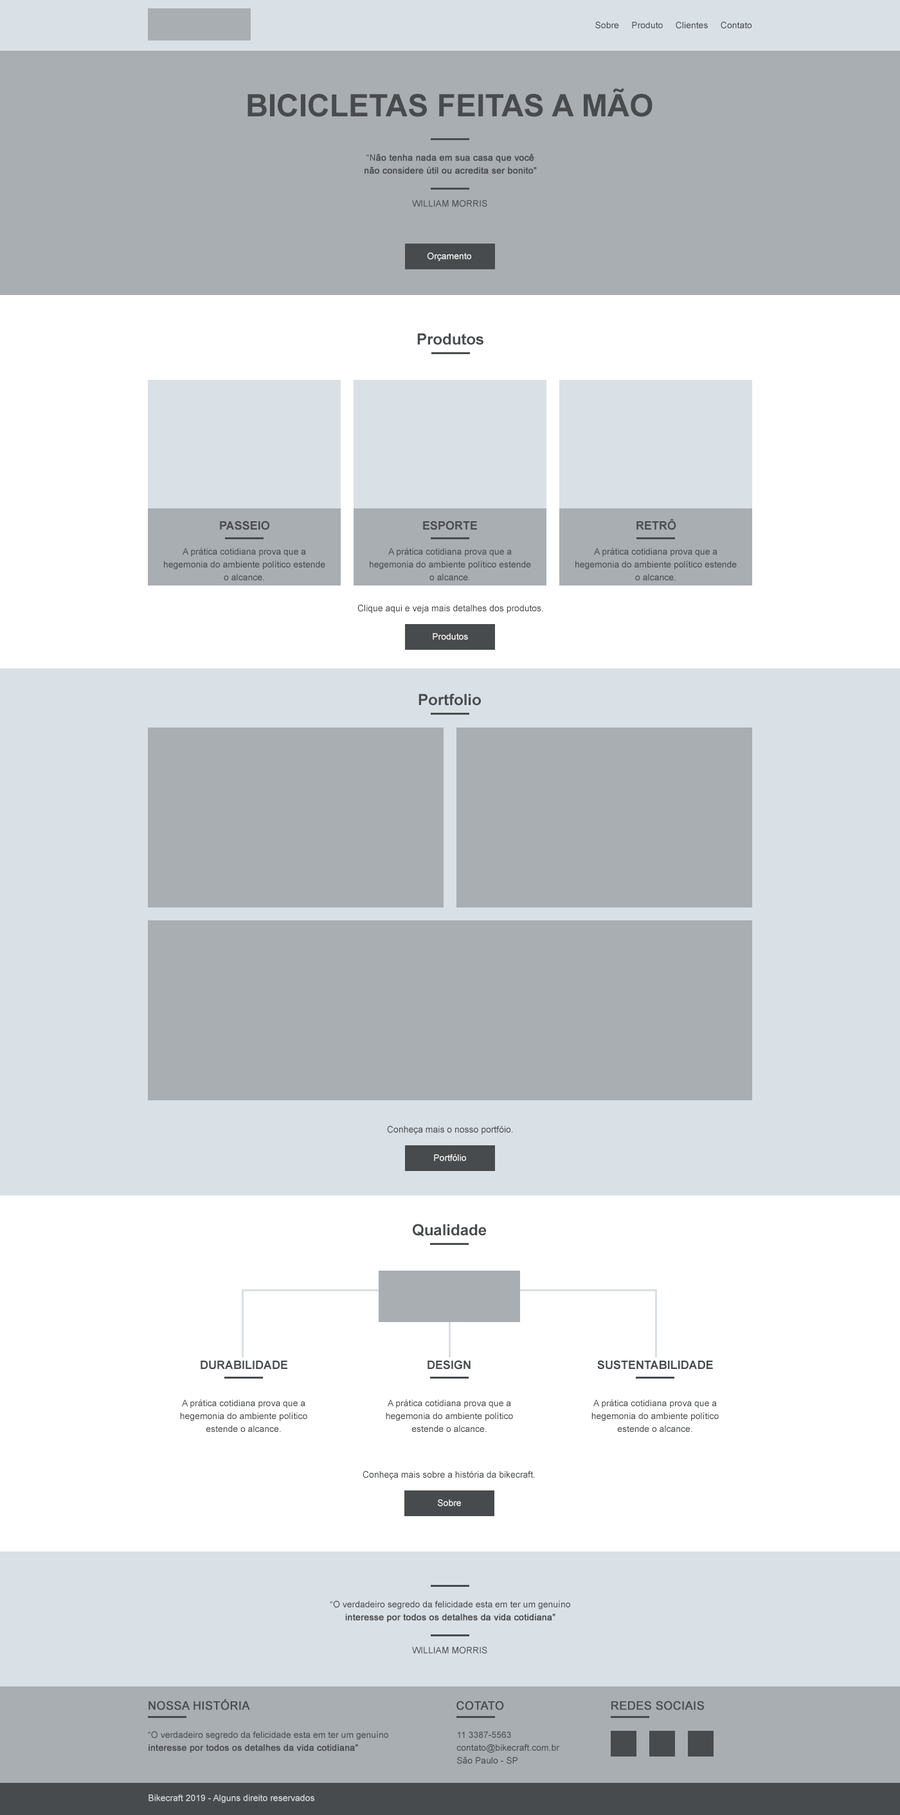
<style>
.page{position:relative;width:900px;height:1815px;background:#ffffff}
.page>*{position:absolute;margin:0}
.t1{font:9px "ArialMT";color:#484b4d}
.t2{font:30.9px "Arial-BoldMT";color:#484b4d;text-transform:uppercase}
.t3{font:9px/12.9px "ArialMT";color:#484b4d;font-weight:bold}
.t4{font:9px/12.9px "ArialMT";color:#484b4d;text-transform:uppercase}
.t5{font:9px "ArialMT";color:#484b4d;text-transform:uppercase}
.t6{font:9px "ArialMT";color:#ffffff}
.t7{font:15.4px "Arial-BoldMT";color:#484b4d}
.t8{font:11.6px "Arial-BoldMT";color:#484b4d;text-transform:uppercase}
.t9{font:9px/12.9px "ArialMT";color:#484b4d}
.t10{font:9.2px "ArialMT";color:#484b4d}
.t11{font:11.6px "ArialMT";color:#484b4d;text-transform:uppercase;font-weight:bold}
.t12{font:9px "ArialMT";color:#d9e0e6}
</style>
<div class="page">
<p class="t1" style="left:595px;top:21px;width:157px;height:8px">Sobre     Produto     Clientes     Contato</p>
<p class="t2" style="left:247px;top:88px;width:405px;height:29px">Bicicletas feitas a mão</p>
<p class="t3" style="left:364px;top:154px;width:173px;height:20px;text-align:center"><span class="t4">“N</span>ão tenha nada em sua casa que você<br>não considere útil ou acredita ser bonito”</p>
<p class="t5" style="left:412px;top:200px;width:75px;height:7px">william morris</p>
<p class="t6" style="left:427px;top:253px;width:44px;height:8px">Orçamento</p>
<p class="t7" style="left:417px;top:333px;width:66px;height:12px">Produtos</p>
<p class="t8" style="left:220px;top:521px;width:49px;height:9px">passeio</p>
<p class="t8" style="left:423px;top:521px;width:54px;height:9px">esporte</p>
<p class="t8" style="left:636px;top:519px;width:40px;height:11px">retrô</p>
<p class="t9" style="left:164px;top:548px;width:161px;height:32px;text-align:center">A prática cotidiana prova que a hegemonia do ambiente político estende o alcance.</p>
<p class="t9" style="left:370px;top:548px;width:161px;height:32px;text-align:center">A prática cotidiana prova que a hegemonia do ambiente político estende o alcance.</p>
<p class="t9" style="left:575px;top:548px;width:162px;height:32px;text-align:center">A prática cotidiana prova que a hegemonia do ambiente político estende o alcance.</p>
<p class="t10" style="left:357px;top:604px;width:186px;height:9px">Clique aqui e veja mais detalhes dos produtos.</p>
<p class="t6" style="left:433px;top:633px;width:35px;height:7px">Produtos</p>
<p class="t7" style="left:418px;top:694px;width:63px;height:12px">Portfolio</p>
<p class="t10" style="left:387px;top:1125px;width:126px;height:9px">Conheça mais o nosso portfóio.</p>
<p class="t6" style="left:434px;top:1154px;width:32px;height:7px">Portfólio</p>
<p class="t7" style="left:413px;top:1224px;width:74px;height:13px">Qualidade</p>
<p class="t8" style="left:201px;top:1361px;width:86px;height:9px">DURABILIDADE</p>
<p class="t8" style="left:427px;top:1360px;width:44px;height:10px">Design</p>
<p class="t8" style="left:597px;top:1360px;width:116px;height:10px">SUSTENTABILIDADE</p>
<p class="t9" style="left:180px;top:1399px;width:127px;height:33px;text-align:center">A prática cotidiana prova que a hegemonia do ambiente político estende o alcance.</p>
<p class="t9" style="left:386px;top:1399px;width:127px;height:33px;text-align:center">A prática cotidiana prova que a hegemonia do ambiente político estende o alcance.</p>
<p class="t9" style="left:591px;top:1399px;width:128px;height:33px;text-align:center">A prática cotidiana prova que a hegemonia do ambiente político estende o alcance.</p>
<p class="t10" style="left:363px;top:1471px;width:172px;height:9px">Conheça mais sobre a história da bikecraft.</p>
<p class="t6" style="left:438px;top:1500px;width:23px;height:7px">Sobre</p>
<p class="t9" style="left:330px;top:1601px;width:240px;height:21px;text-align:center"><span class="t4">“O </span>verdadeiro segredo da felicidade esta em ter um genuíno<br><span class="t3">interesse por todos os detalhes da vida cotidiana”</span></p>
<p class="t5" style="left:412px;top:1647px;width:75px;height:7px">william morris</p>
<p class="t11" style="left:148px;top:1699px;width:102px;height:11px">Nossa história</p>
<p class="t11" style="left:456px;top:1701px;width:48px;height:9px">cotato</p>
<p class="t11" style="left:611px;top:1701px;width:93px;height:9px">redes sociais</p>
<p class="t9" style="left:148px;top:1731px;width:240px;height:22px"><span class="t4">“O </span>verdadeiro segredo da felicidade esta em ter um genuíno <span class="t3">interesse por todos os detalhes da vida cotidiana”</span></p>
<p class="t9" style="left:456px;top:1732px;width:104px;height:32px"><span class="t4">11 3387-5563<br></span>contato@bikecraft.com.br<br>São Paulo - SP</p>
<p class="t12" style="left:148px;top:1795px;width:166px;height:8px">Bikecraft 2019 - Alguns direito reservados</p>
</div>
